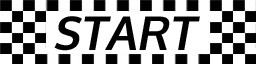
<style>
.page{position:relative;width:256px;height:64px;background:#ffffff}
.page>*{position:absolute;margin:0}
.t1{font:46.8px "Oxygen-Bold";color:#000000;font-style:italic}
</style>
<div class="page">
<p class="t1" style="left:54px;top:16px;width:146px;height:35px">START</p>
</div>
